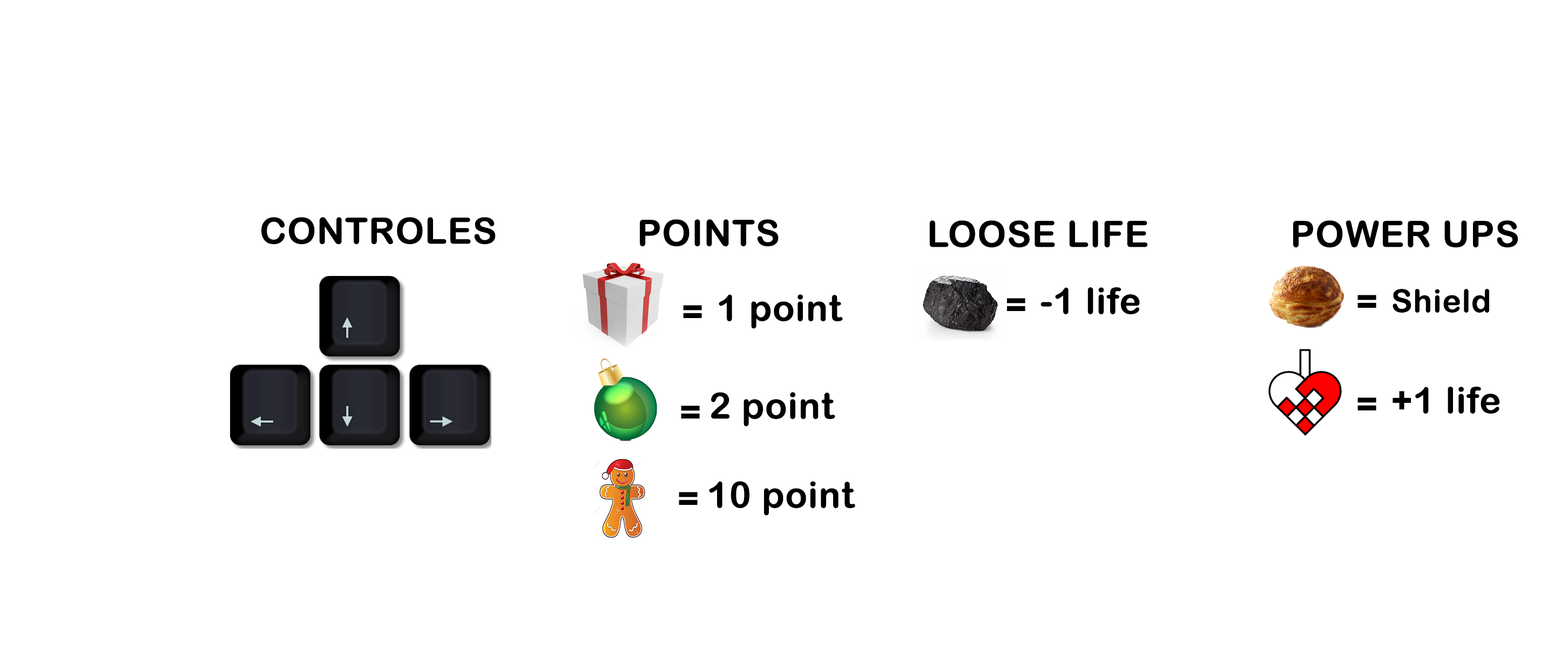
<style>
.page{position:relative;width:1568px;height:648px;background:#ffffff}
.page>*{position:absolute;margin:0}
.t1{font:36px "ArialRoundedMTBold";color:#000000;font-weight:bold}
.t2{font:31.5px "ArialRoundedMTBold";color:#000000;font-weight:bold}
</style>
<div class="page">
<p class="t1" style="left:261px;top:217px;width:235px;height:28px">CONTROLES</p>
<p class="t1" style="left:640px;top:219px;width:139px;height:28px">POINTS</p>
<p class="t1" style="left:929px;top:220px;width:218px;height:28px">LOOSE LIFE</p>
<p class="t1" style="left:1293px;top:220px;width:225px;height:28px">POWER UPS</p>
<p class="t1" style="left:1040px;top:287px;width:100px;height:27px">-1 life</p>
<p class="t2" style="left:1393px;top:289px;width:96px;height:24px">Shield</p>
<p class="t1" style="left:683px;top:305px;width:19px;height:13px">=</p>
<p class="t1" style="left:719px;top:294px;width:124px;height:35px">1 point</p>
<p class="t1" style="left:1006px;top:298px;width:19px;height:13px">=</p>
<p class="t1" style="left:1357px;top:295px;width:19px;height:13px">=</p>
<p class="t1" style="left:1393px;top:387px;width:107px;height:27px">+1 life</p>
<p class="t1" style="left:711px;top:392px;width:124px;height:35px">2 point</p>
<p class="t1" style="left:1357px;top:397px;width:19px;height:13px">=</p>
<p class="t1" style="left:681px;top:405px;width:19px;height:13px">=</p>
<p class="t1" style="left:709px;top:481px;width:146px;height:35px">10 point</p>
<p class="t1" style="left:679px;top:492px;width:19px;height:13px">=</p>
</div>
